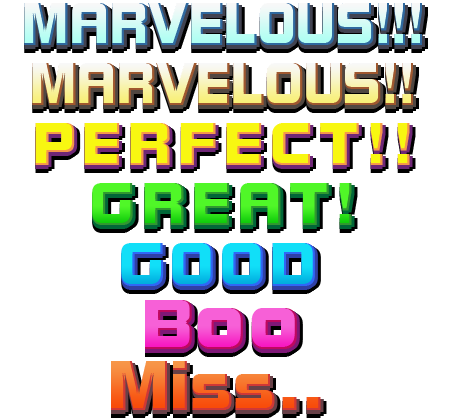
<style>
.page{position:relative;width:450px;height:420px;background:#ffffff}
.page>*{position:absolute;margin:0}
.t1{font:59.3px "Bolster";letter-spacing:-0.01em;scale:0.9 1}
.t2{font:59.3px "Bolster";letter-spacing:0.11em;color:#f8f711}
.t3{font:59.3px "Bolster";letter-spacing:0.12em;color:#f8f711}
.t4{font:59.3px "Bolster";letter-spacing:0.13em;color:#f8f711}
.t5{font:59.3px "Bolster";letter-spacing:0.11em;color:#41f720}
.t6{font:61.2px "Bolster";letter-spacing:0.075em}
.t7{font:79px "Bolster";letter-spacing:0.05em}
.t8{font:69.1px "Bolster"}
</style>
<div class="page">
<p class="t1" style="left:24px;top:3px;width:398px;height:42px">MARVELOUS!!!</p>
<p class="t1" style="left:32px;top:63px;width:381px;height:42px">MARVELOUS!!</p>
<p class="t2" style="left:35px;top:123px;width:375px;height:42px">PERFEC<span class="t3">T</span><span class="t4">!</span><span class="t3">!</span></p>
<p class="t5" style="left:92px;top:183px;width:260px;height:42px">GREAT!</p>
<p class="t6" style="left:121px;top:243px;width:194px;height:43px">GOOD</p>
<p class="t7" style="left:145px;top:300px;width:152px;height:49px"><span class="t8">B</span>oo</p>
<p class="t8" style="left:111px;top:361px;width:210px;height:49px">Miss..</p>
</div>
